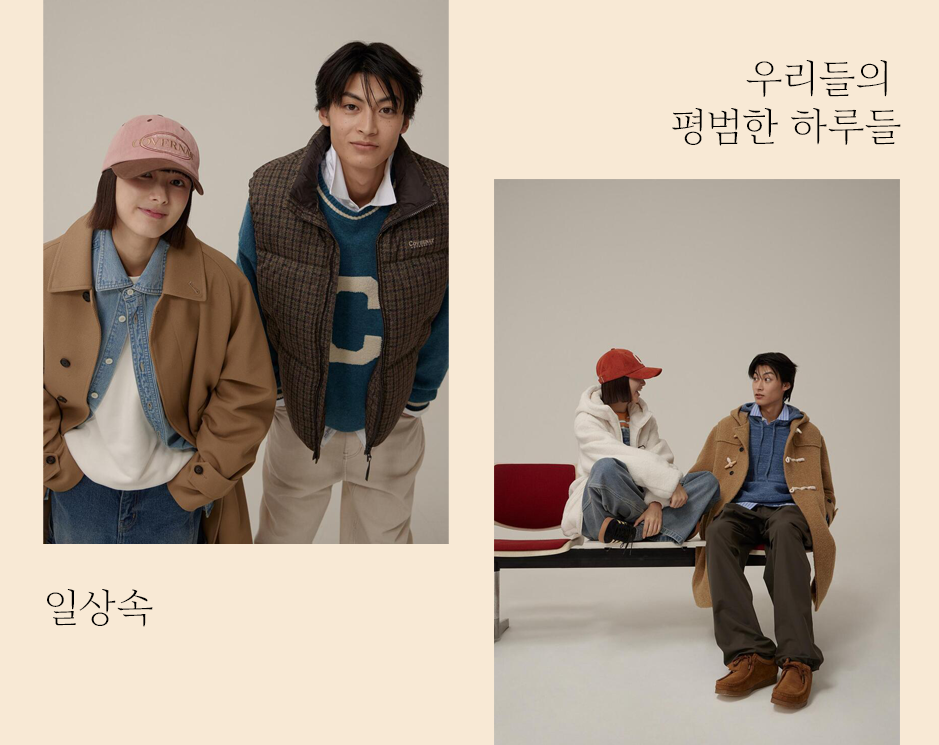
<style>
.page{position:relative;width:939px;height:745px;background:#f8e9d5}
.page>*{position:absolute;margin:0}
.t1{font:40px/48px "Arita-buri-Light_OTF";letter-spacing:-0.02em;color:#000000}
.t2{font:40px "Arita-buri-Light_OTF";letter-spacing:-0.02em;color:#000000}
</style>
<div class="page">
<p class="t1" style="left:672px;top:60px;width:229px;height:86px;text-align:right">우리들의 <br>평범한 하루들</p>
<p class="t2" style="left:47px;top:589px;width:106px;height:38px">일상속</p>
</div>
